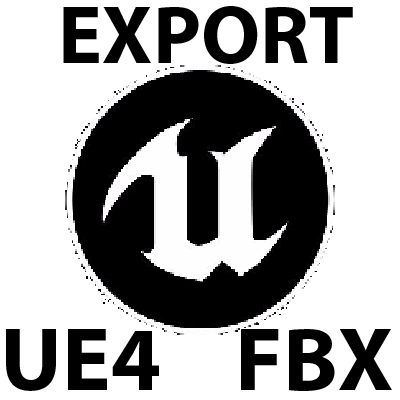
<style>
.page{position:relative;width:400px;height:400px;background:#ffffff}
.page>*{position:absolute;margin:0}
.t1{font:82.4px "MyriadPro-Bold";color:#000000}
.t2{font:91.1px "MyriadPro-Bold";color:#000000}
</style>
<div class="page">
<p class="t1" style="left:63px;top:6px;width:290px;height:58px">EXPORT</p>
<p class="t2" style="left:6px;top:329px;width:386px;height:62px">UE4    FBX</p>
</div>
